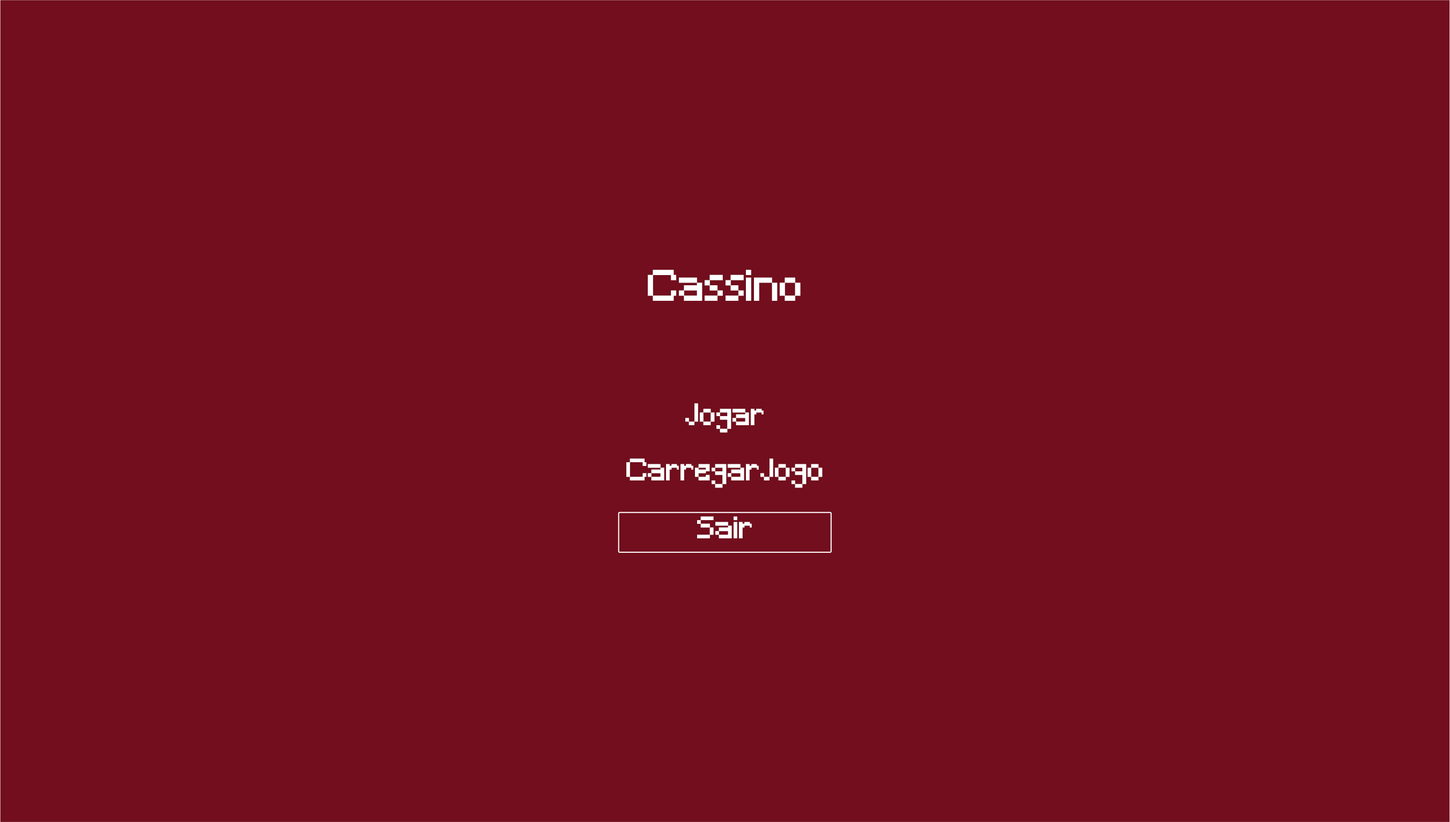
<style>
.page{position:relative;width:1450px;height:822px;background:#720e1d}
.page>*{position:absolute;margin:0}
.t1{font:41.3px "Minecraft";color:#ffffff}
.t2{font:29.1px "Minecraft";color:#ffffff}
</style>
<div class="page">
<p class="t1" style="left:648px;top:270px;width:153px;height:31px">Cassino</p>
<p class="t2" style="left:685px;top:403px;width:79px;height:30px">Jogar</p>
<p class="t2" style="left:626px;top:459px;width:197px;height:29px">CarregarJogo</p>
<p class="t2" style="left:697px;top:516px;width:55px;height:22px">Sair</p>
</div>
